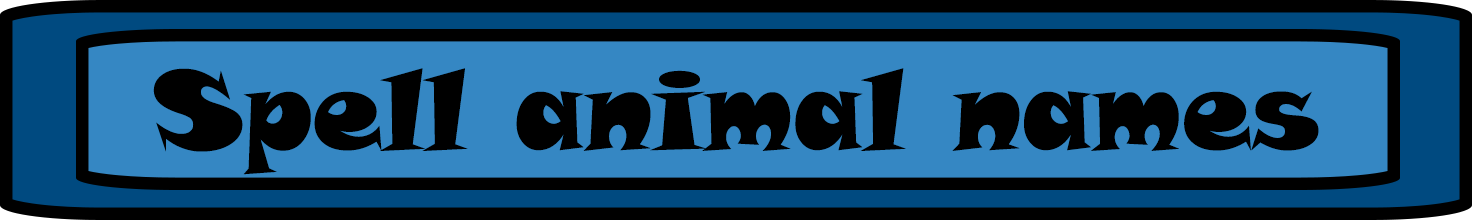
<style>
.page{position:relative;width:1472px;height:220px;background:#3587c3}
.page>*{position:absolute;margin:0}
.t1{font:110px "SnapITC-Regular";color:#000000}
</style>
<div class="page">
<p class="t1" style="left:153px;top:68px;width:1166px;height:107px">Spell animal names</p>
</div>
